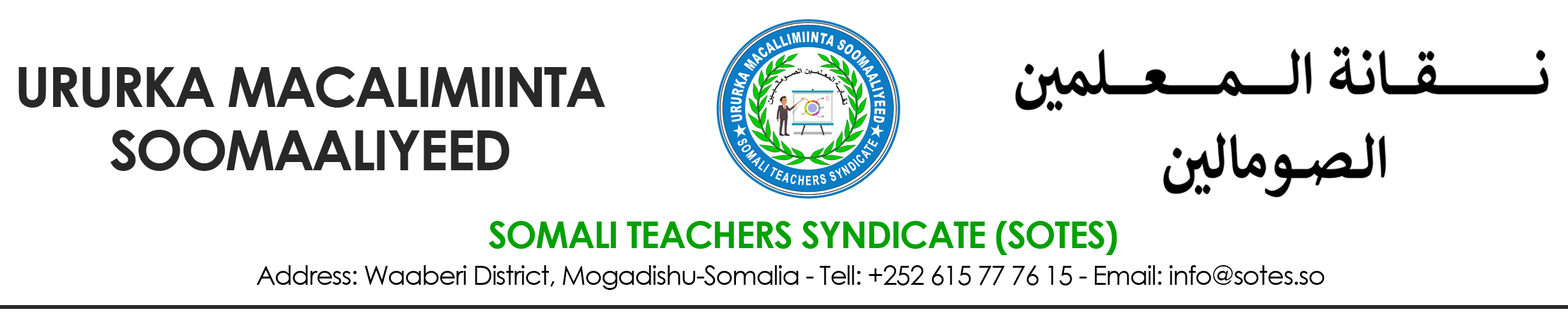
<style>
.page{position:relative;width:1568px;height:319px;background:#ffffff}
.page>*{position:absolute;margin:0}
.t1{font:55.3px/63.3px "CenturyGothic-Bold";letter-spacing:-0.035em;color:#282828}
.t2{font:36.9px "CenturyGothic-Bold";letter-spacing:-0.035em;color:#02a003}
.t3{font:26.3px "CenturyGothic";letter-spacing:-0.035em;color:#000000}
</style>
<div class="page">
<p class="t1" style="left:18px;top:66px;width:587px;height:105px;text-align:center">URURKA MACALIMIINTA<br>SOOMAALIYEED</p>
<p class="t2" style="left:489px;top:221px;width:628px;height:34px">SOMALI TEACHERS SYNDICATE (SOTES)</p>
<p class="t3" style="left:257px;top:265px;width:1068px;height:25px">Address: Waaberi District, Mogadishu-Somalia - Tell: +252 615 77 76 15 - Email: info@sotes.so</p>
</div>
